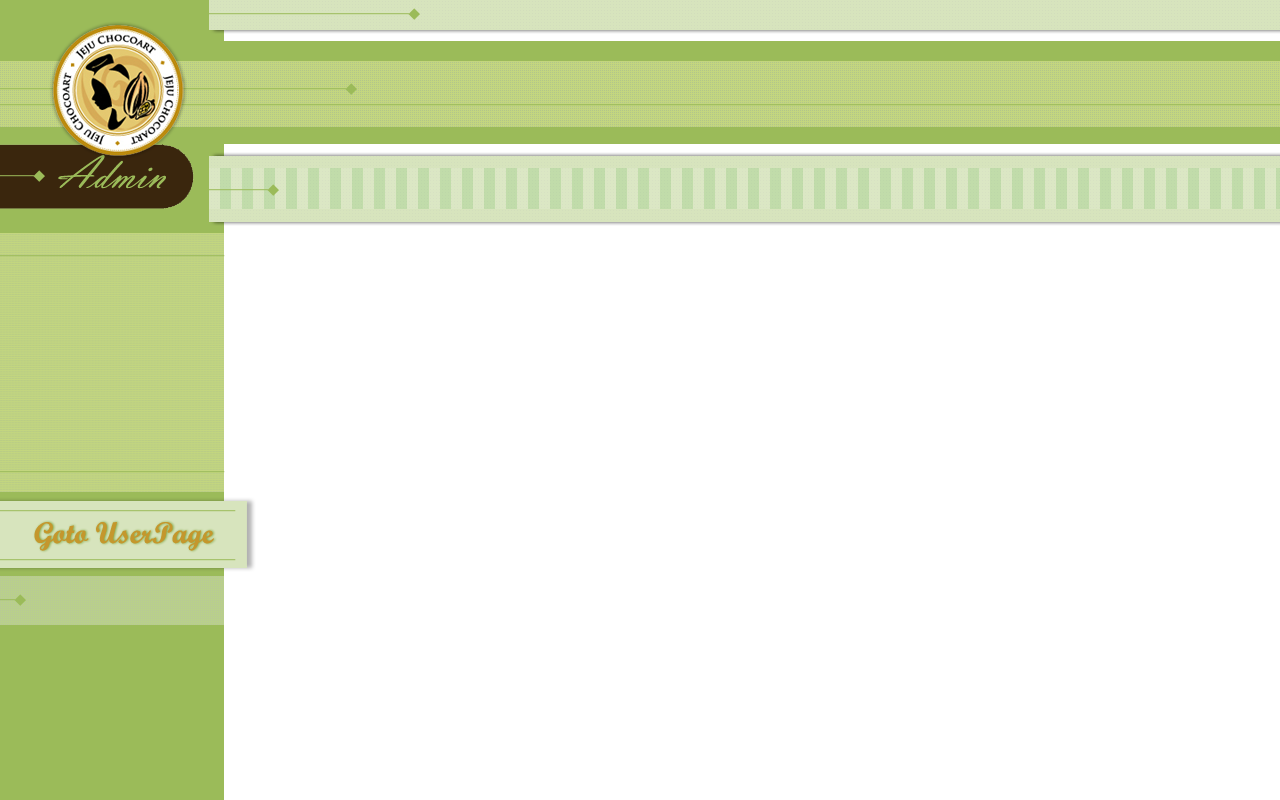
<style>
.page{position:relative;width:1280px;height:800px;background:#ffffff}
.page>*{position:absolute;margin:0}
.t1{font:46px "VladimirScript";color:#9bbb59}
.t2{font:30px "ScriptMTBold";color:#c4972d}
</style>
<div class="page">
<p class="t1" style="left:58px;top:155px;width:108px;height:34px">Admin</p>
<p class="t2" style="left:34px;top:522px;width:180px;height:29px">Goto UserPage</p>
</div>
